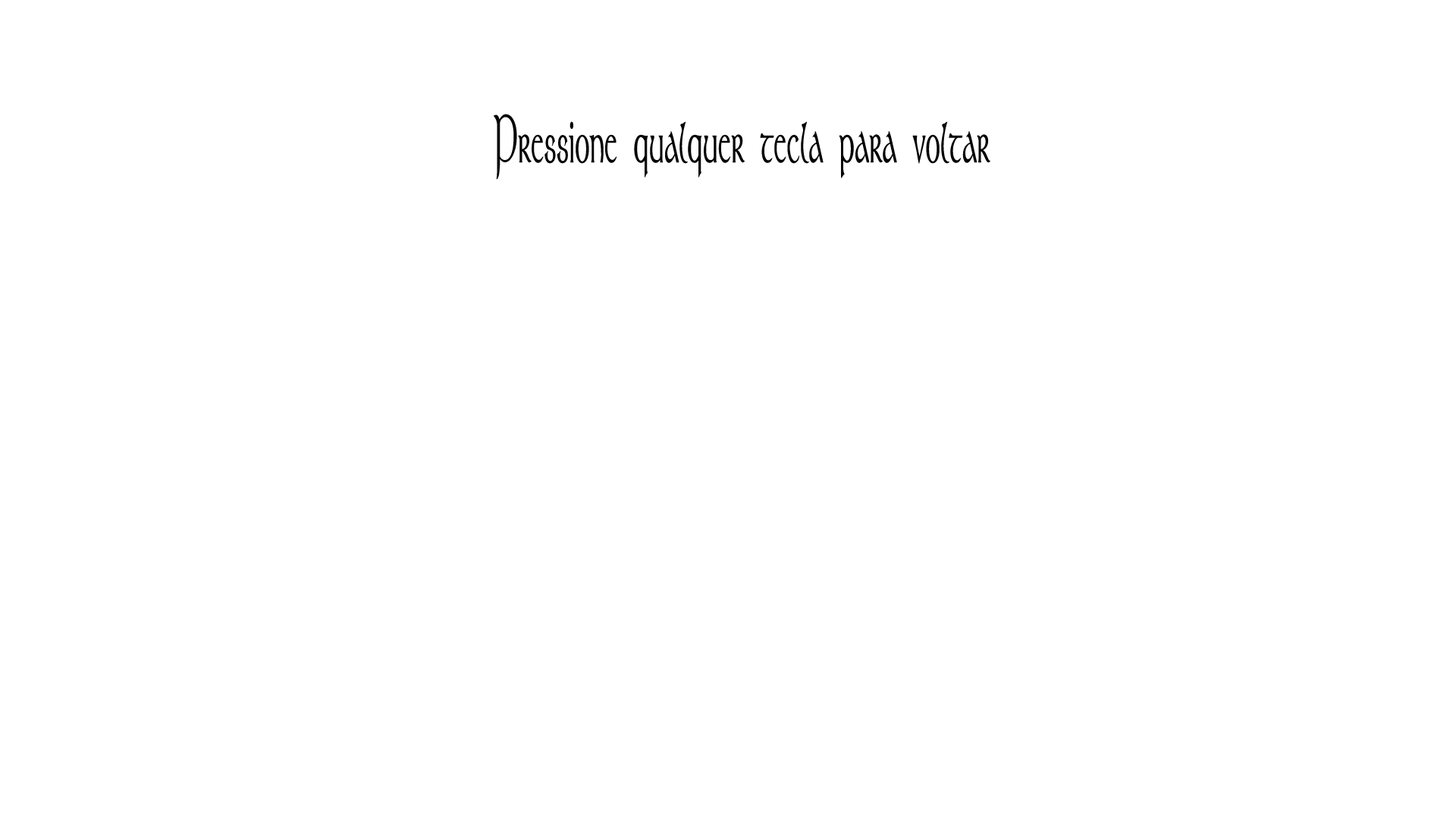
<style>
.page{position:relative;width:1456px;height:819px;background:#ffffff}
.page>*{position:absolute;margin:0}
.t1{font:67.1px "Stonehenge";color:#030303;font-weight:bold;scale:0.45 1}
</style>
<div class="page">
<p class="t1" style="left:494px;top:114px;width:496px;height:66px">Pressione qualquer tecla para voltar</p>
</div>
